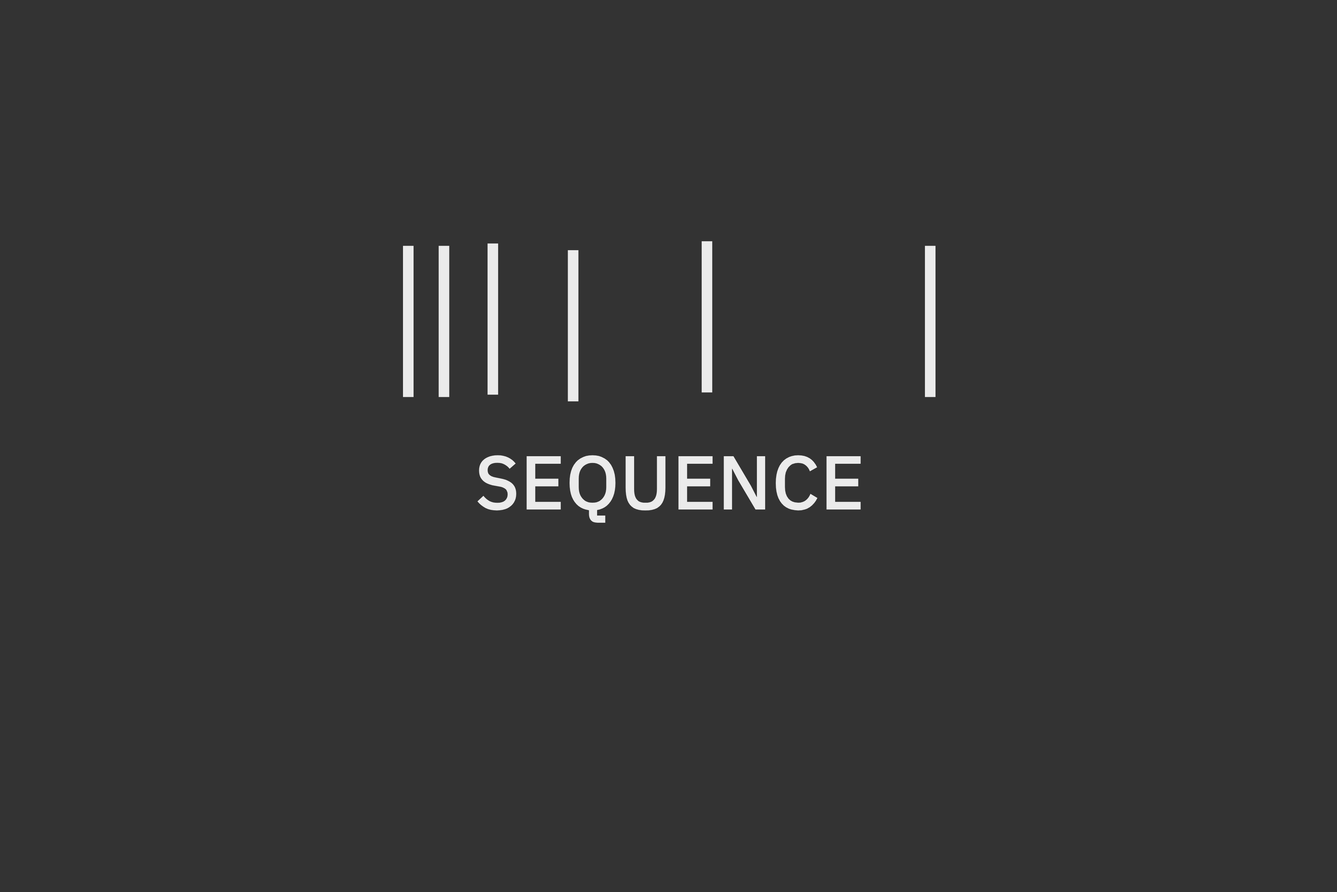
<style>
.page{position:relative;width:1337px;height:892px;background:#333333}
.page>*{position:absolute;margin:0}
.t1{font:76.4px "IBMPlexSans-Medium";color:#ebebeb}
</style>
<div class="page">
<p class="t1" style="left:478px;top:455px;width:383px;height:67px">SEQUENCE</p>
</div>
